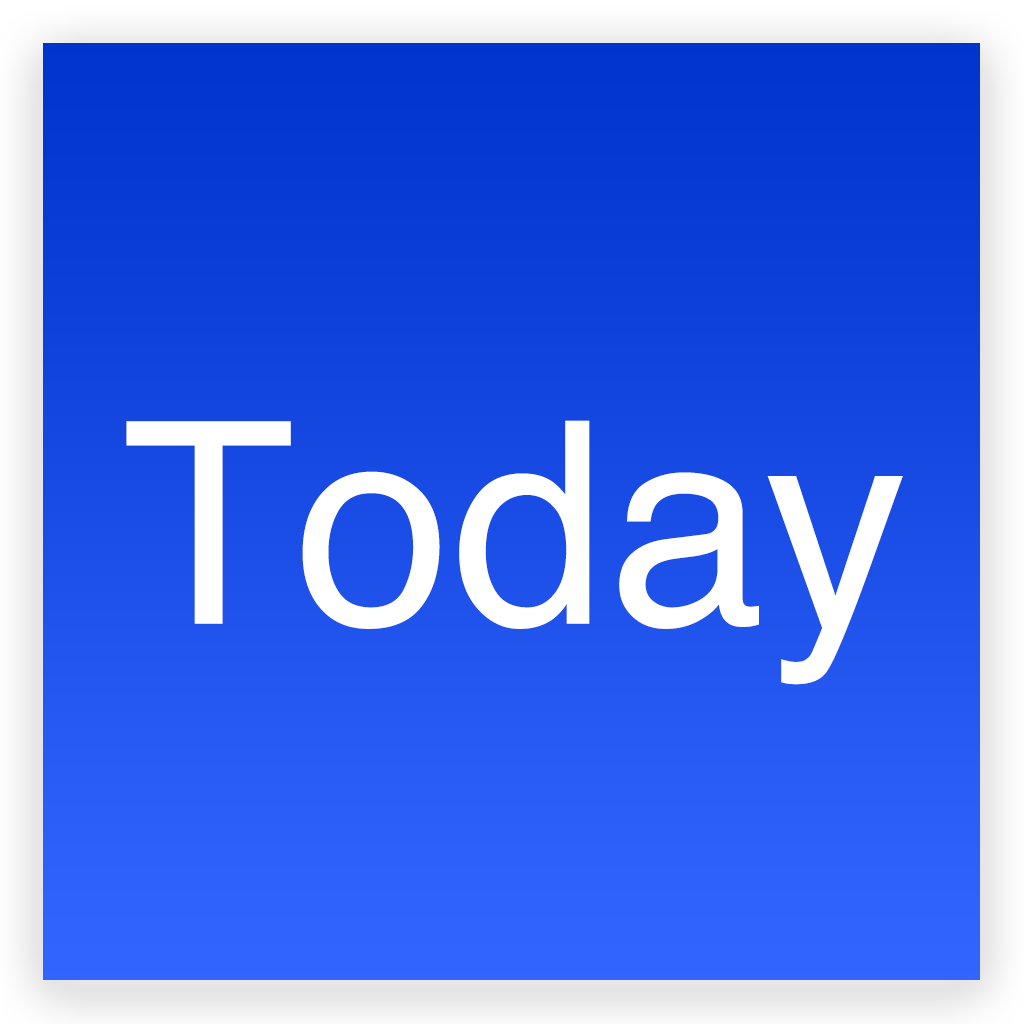
<style>
.page{position:relative;width:1024px;height:1024px}
.page>*{position:absolute;margin:0}
.t1{font:282px "Helvetica";color:#ffffff}
</style>
<div class="page">
<p class="t1" style="left:126px;top:420px;width:777px;height:265px">Today</p>
</div>
